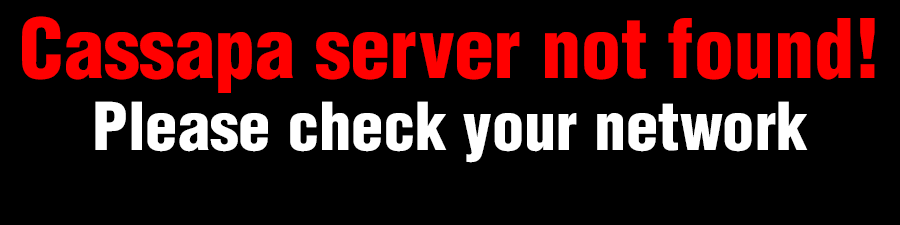
<style>
.page{position:relative;width:900px;height:225px;background:#000000}
.page>*{position:absolute;margin:0}
.t1{font:80px/72px "Helvetica-CondensedBlack";color:#ff0000}
.t2{font:64.3px/72px "Helvetica-CondensedBlack";color:#ffffff}
</style>
<div class="page">
<p class="t1" style="left:22px;top:16px;width:853px;height:147px;text-align:center">Cassapa server not found! <span class="t2">Please check your network</span></p>
</div>
